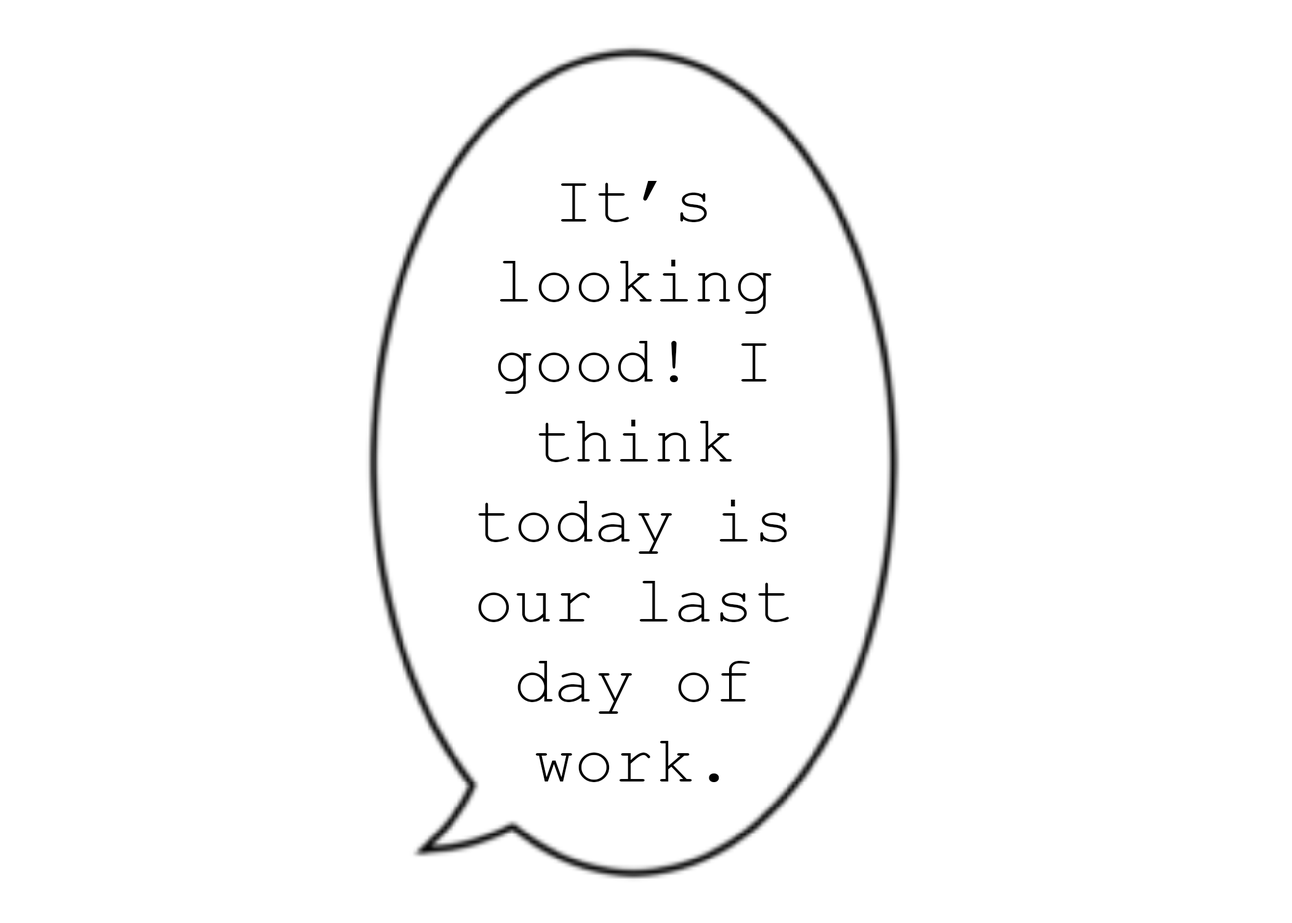
<style>
.page{position:relative;width:1292px;height:923px;background:#ffffff}
.page>*{position:absolute;margin:0}
.t1{font:66.7px "CourierNewPSMT";color:#000000}
</style>
<div class="page">
<p class="t1" style="left:478px;top:181px;width:311px;height:601px;text-align:center">It’s looking good! I think today is our last day of work.</p>
</div>
